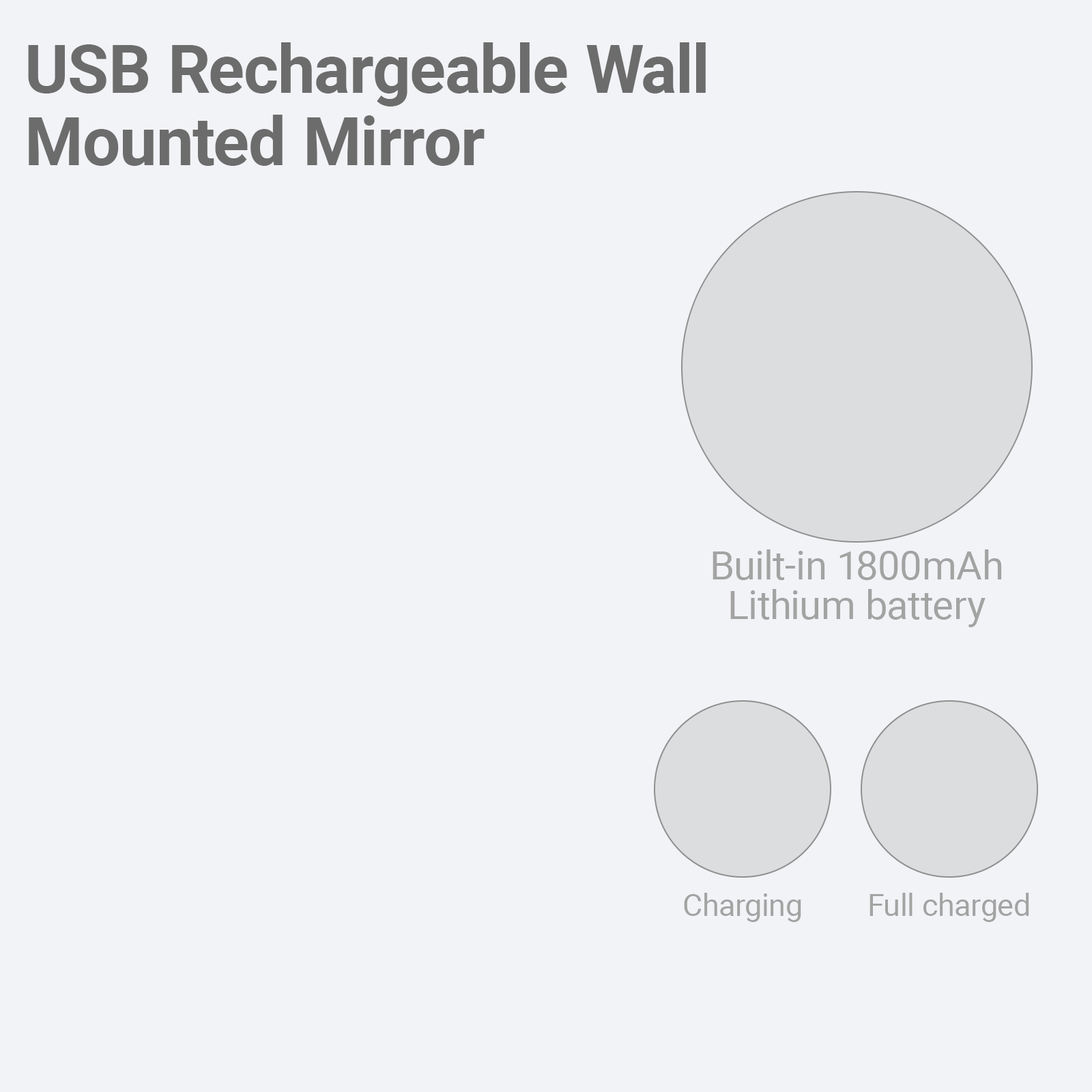
<style>
.page{position:relative;width:1092px;height:1092px;background:#f2f3f6}
.page>*{position:absolute;margin:0}
.t1{font:66.9px/72.6px "Roboto-Bold";color:#6c6c6c}
.t2{font:39.6px/39px "Roboto-Regular";color:#a3a3a3}
.t3{font:30.7px "Roboto-Regular";color:#a3a3a3}
</style>
<div class="page">
<p class="t1" style="left:28px;top:42px;width:678px;height:124px">USB Rechargeable Wall<br>Mounted Mirror</p>
<p class="t2" style="left:713px;top:549px;width:289px;height:78px;text-align:center">Built-in 1800mAh<br>Lithium battery</p>
<p class="t3" style="left:684px;top:893px;width:117px;height:29px">Charging</p>
<p class="t3" style="left:869px;top:893px;width:160px;height:29px">Full charged</p>
</div>
